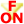
<style>
.page{position:relative;width:24px;height:24px;background:#ffffff}
.page>*{position:absolute;margin:0}
.t1{font:13.9px "Verdana-Bold";color:#ff0000}
</style>
<div class="page">
<p class="t1" style="left:8px;top:0px;width:8px;height:11px">F</p>
<p class="t1" style="left:0px;top:12px;width:23px;height:12px">ON</p>
</div>
